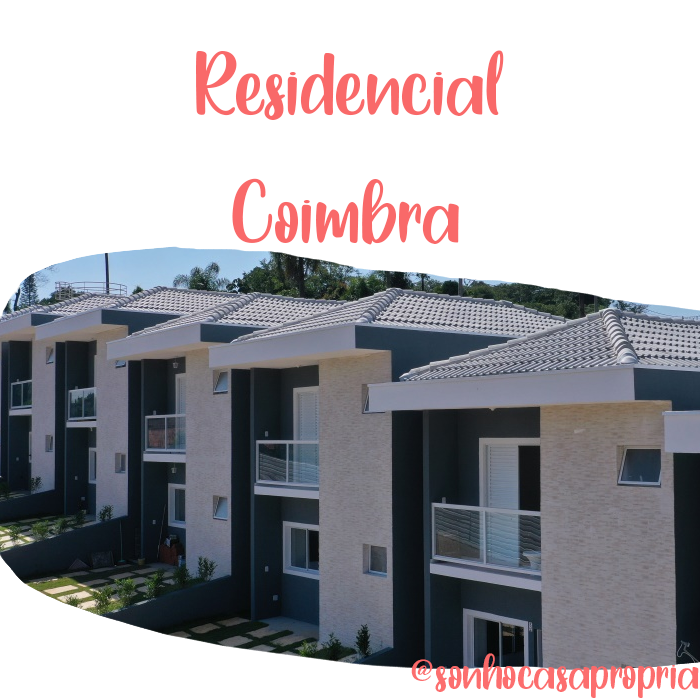
<style>
.page{position:relative;width:700px;height:700px;background:#ffffff}
.page>*{position:absolute;margin:0}
.t1{font:107px "YellowRabbit-PersonalUse";color:#f96969}
.t2{font:60px "YellowRabbit-PersonalUse";color:#fc6a6a}
</style>
<div class="page">
<p class="t1" style="left:196px;top:50px;width:308px;height:195px;text-align:center">Residencial<br>Coimbra</p>
<p class="t2" style="left:411px;top:653px;width:288px;height:45px">@sonhocasapropria</p>
</div>
